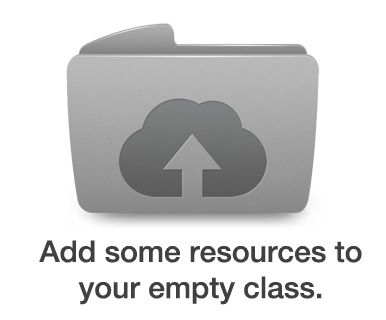
<style>
.page{position:relative;width:386px;height:320px;background:#ffffff}
.page>*{position:absolute;margin:0}
.t1{font:30px "HelveticaNeue-Medium";color:#404040}
</style>
<div class="page">
<p class="t1" style="left:39px;top:240px;width:323px;height:65px;text-align:center">Add some resources to<br>your empty class.</p>
</div>
